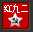
<style>
.page{position:relative;width:33px;height:32px;background:#c50000}
.page>*{position:absolute;margin:0}
.t1{font:10.4px "SimSun";letter-spacing:-0.25em;color:#ffffff}
</style>
<div class="page">
<p class="t1" style="left:4px;top:4px;width:24px;height:9px">红九二</p>
</div>
